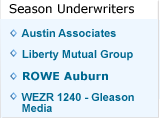
<style>
.page{position:relative;width:160px;height:118px;background:#eef7ff}
.page>*{position:absolute;margin:0}
.t1{font:12px "Verdana";color:#000000}
.t2{font:11px "Arial-BoldMT";color:#006991}
.t3{font:11px "Verdana-Bold";color:#006991}
.t4{font:11px/11px "Arial-BoldMT";color:#006991}
</style>
<div class="page">
<p class="t1" style="left:9px;top:3px;width:125px;height:11px">Season Underwriters</p>
<p class="t2" style="left:21px;top:29px;width:95px;height:8px">Austin Associates</p>
<p class="t2" style="left:22px;top:50px;width:111px;height:11px">Liberty Mutual Group</p>
<p class="t3" style="left:23px;top:71px;width:85px;height:10px">ROWE Auburn</p>
<p class="t4" style="left:21px;top:93px;width:113px;height:19px">WEZR 1240 - Gleason<br>Media</p>
</div>
